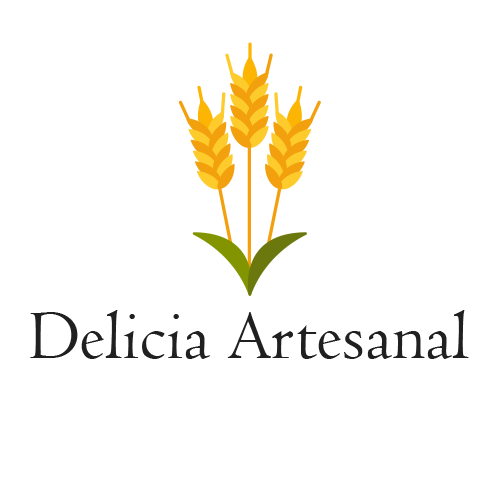
<style>
.page{position:relative;width:500px;height:500px;background:#ffffff}
.page>*{position:absolute;margin:0}
.t1{font:70.8px "Centaur";color:#202020}
</style>
<div class="page">
<p class="t1" style="left:30px;top:310px;width:439px;height:49px">Delicia Artesanal</p>
</div>
